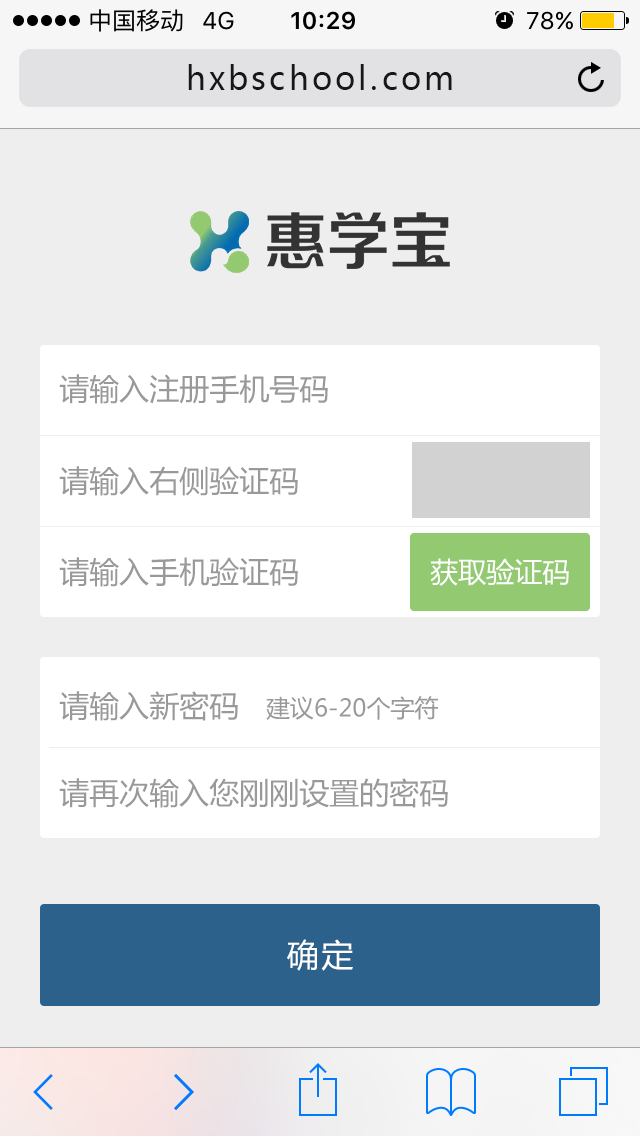
<style>
.page{position:relative;width:640px;height:1136px;background:#eeeeee}
.page>*{position:absolute;margin:0}
.t1{font:32px "MicrosoftYaHei";letter-spacing:0.1em;color:#171717}
.t2{font:30px "MicrosoftYaHei";color:#999999}
.t3{font:28px "MicrosoftYaHei";color:#ffffff}
.t4{font:24px "MicrosoftYaHei";color:#999999}
.t5{font:32px "MicrosoftYaHei";letter-spacing:0.075em;color:#ffffff}
</style>
<div class="page">
<p class="t1" style="left:188px;top:64px;width:264px;height:26px">hxbschool.com</p>
<p class="t2" style="left:59px;top:374px;width:269px;height:30px">请输入注册手机号码</p>
<p class="t2" style="left:59px;top:466px;width:239px;height:30px">请输入右侧验证码</p>
<p class="t2" style="left:59px;top:557px;width:239px;height:30px">请输入手机验证码</p>
<p class="t3" style="left:430px;top:558px;width:139px;height:28px">获取验证码</p>
<p class="t4" style="left:59px;top:691px;width:379px;height:30px"><span class="t2">请输入新密码   </span>建议6-20个字符</p>
<p class="t2" style="left:59px;top:778px;width:389px;height:30px">请再次输入您刚刚设置的密码</p>
<p class="t5" style="left:287px;top:939px;width:66px;height:32px">确定</p>
</div>
